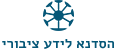
<style>
.page{position:relative;width:116px;height:50px;background:#ffffff}
.page>*{position:absolute;margin:0}
.t1{font:14px "Alef-Bold";color:#065777}
</style>
<div class="page">
<p class="t1" style="left:2px;top:39px;width:112px;height:10px">הסדנא לידע ציבורי</p>
</div>
